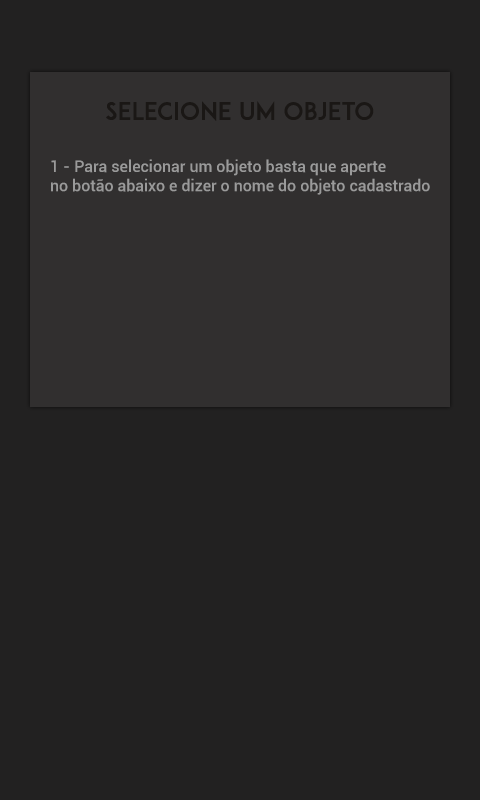
<style>
.page{position:relative;width:480px;height:800px;background:#222121}
.page>*{position:absolute;margin:0}
.t1{font:24px "ADAM.CGPRO";color:#1a1715}
.t2{font:16px "Roboto-Medium";color:#9a9a9a}
</style>
<div class="page">
<p class="t1" style="left:106px;top:101px;width:268px;height:20px">sELECIONE UM OBJETO</p>
<p class="t2" style="left:51px;top:159px;width:379px;height:36px">1 - Para selecionar um objeto basta que aperte <br>no botão abaixo e dizer o nome do objeto cadastrado</p>
</div>
